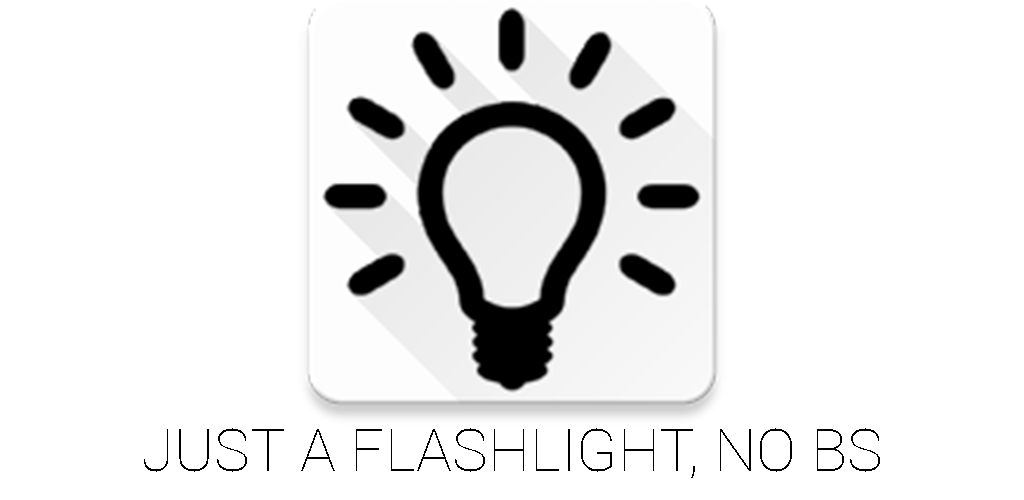
<style>
.page{position:relative;width:1024px;height:500px;background:#ffffff}
.page>*{position:absolute;margin:0}
.t1{font:60px "Roboto-Thin";color:#000000}
</style>
<div class="page">
<p class="t1" style="left:144px;top:428px;width:736px;height:50px">JUST A FLASHLIGHT, NO BS</p>
</div>
